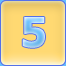
<style>
.page{position:relative;width:66px;height:66px}
.page>*{position:absolute;margin:0}
.t1{font:41px "Tahoma-Bold"}
</style>
<div class="page">
<p class="t1" style="left:22px;top:17px;width:23px;height:31px">5</p>
<p class="t1" style="left:22px;top:17px;width:23px;height:31px">5</p>
</div>
